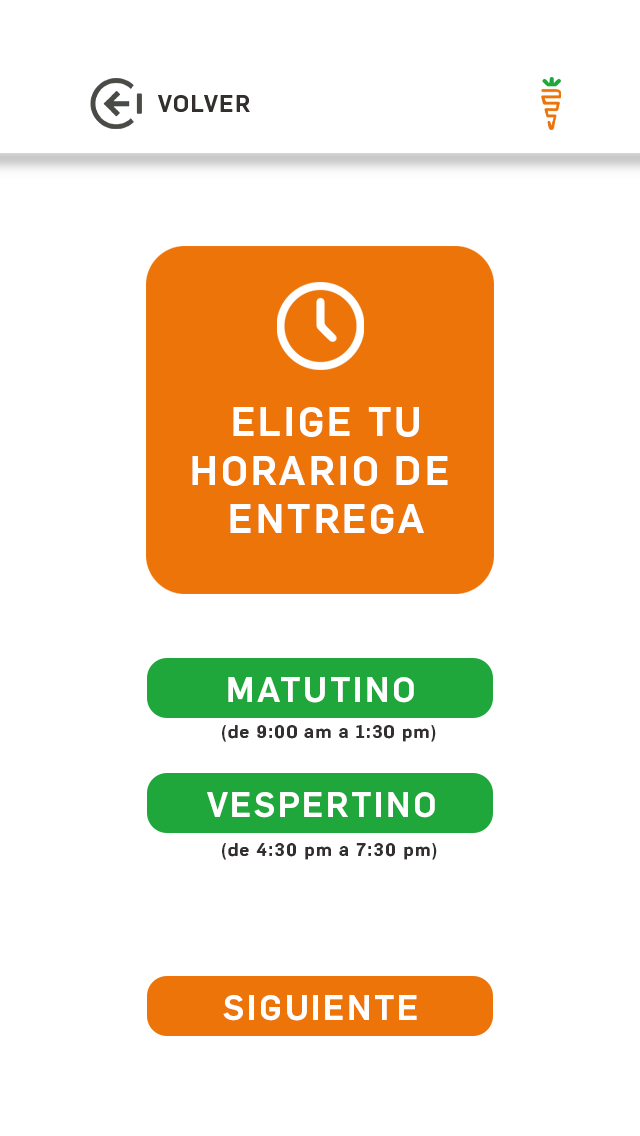
<style>
.page{position:relative;width:640px;height:1136px;background:#ffffff}
.page>*{position:absolute;margin:0}
.t1{font:40.2px "Flama-Medium";letter-spacing:0.075em;color:#ffffff}
.t2{font:34.4px "Flama-Medium";letter-spacing:0.075em;color:#ffffff}
.t3{font:18px "Flama-Medium";letter-spacing:0.075em;color:#332f2e}
.t4{font:18px "Flama-Medium";letter-spacing:0.075em;color:#ffffff}
</style>
<div class="page">
<p class="t1" style="left:192px;top:407px;width:256px;height:127px;text-align:center">ELIGE TU<br>HORARIO DE <br>ENTREGA</p>
<p class="t2" style="left:228px;top:677px;width:186px;height:26px">MATUTINO</p>
<p class="t3" style="left:215px;top:725px;width:221px;height:17px"><span class="t4">(</span>(de 9:00 am a 1:30 pm)</p>
<p class="t2" style="left:207px;top:792px;width:228px;height:26px">VESPERTINO</p>
<p class="t3" style="left:215px;top:843px;width:222px;height:17px"><span class="t4">(</span>(de 4:30 pm a 7:30 pm)</p>
<p class="t2" style="left:223px;top:995px;width:194px;height:26px">SIGUIENTE</p>
</div>
